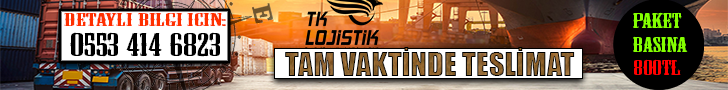
<style>
.page{position:relative;width:728px;height:90px}
.page>*{position:absolute;margin:0}
.t1{font:16.4px "MesquiteStd";color:#ff3000;scale:2.49 1}
.t2{font:19.4px "MesquiteStd";color:#84ff00;scale:1.87 1}
.t3{font:19.4px "MesquiteStd";color:#ff0000;scale:1.87 1}
.t4{font:30.2px "MesquiteStd";color:#000000;scale:1.77 1}
.t5{font:30.5px "Impact"}
</style>
<div class="page">
<p class="t1" style="left:64px;top:12px;width:162px;height:15px">DETAYLI BILGI ICIN:</p>
<p class="t2" style="left:633px;top:12px;width:55px;height:63px">PAKET <br>BASINA <br><span class="t3">800TL</span></p>
<p class="t4" style="left:70px;top:32px;width:150px;height:25px">0553 414 6823</p>
<p class="t5" style="left:285px;top:47px;width:290px;height:29px">TAM VAKTİNDE TESLİMAT</p>
</div>
